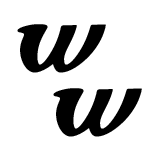
<style>
.page{position:relative;width:160px;height:160px;background:#ffffff}
.page>*{position:absolute;margin:0}
.t1{font:62.6px/64px "SonsieOne-Regular";letter-spacing:0.06em;color:#000000}
</style>
<div class="page">
<p class="t1" style="left:17px;top:24px;width:125px;height:113px;text-align:center">W<br>  W</p>
</div>
